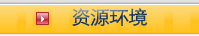
<style>
.page{position:relative;width:199px;height:36px}
.page>*{position:absolute;margin:0}
.t1{font:19px "STXihei";letter-spacing:-0.04em;scale:1.04 1}
</style>
<div class="page">
<p class="t1" style="left:72px;top:8px;width:76px;height:18px">资源环境</p>
</div>
